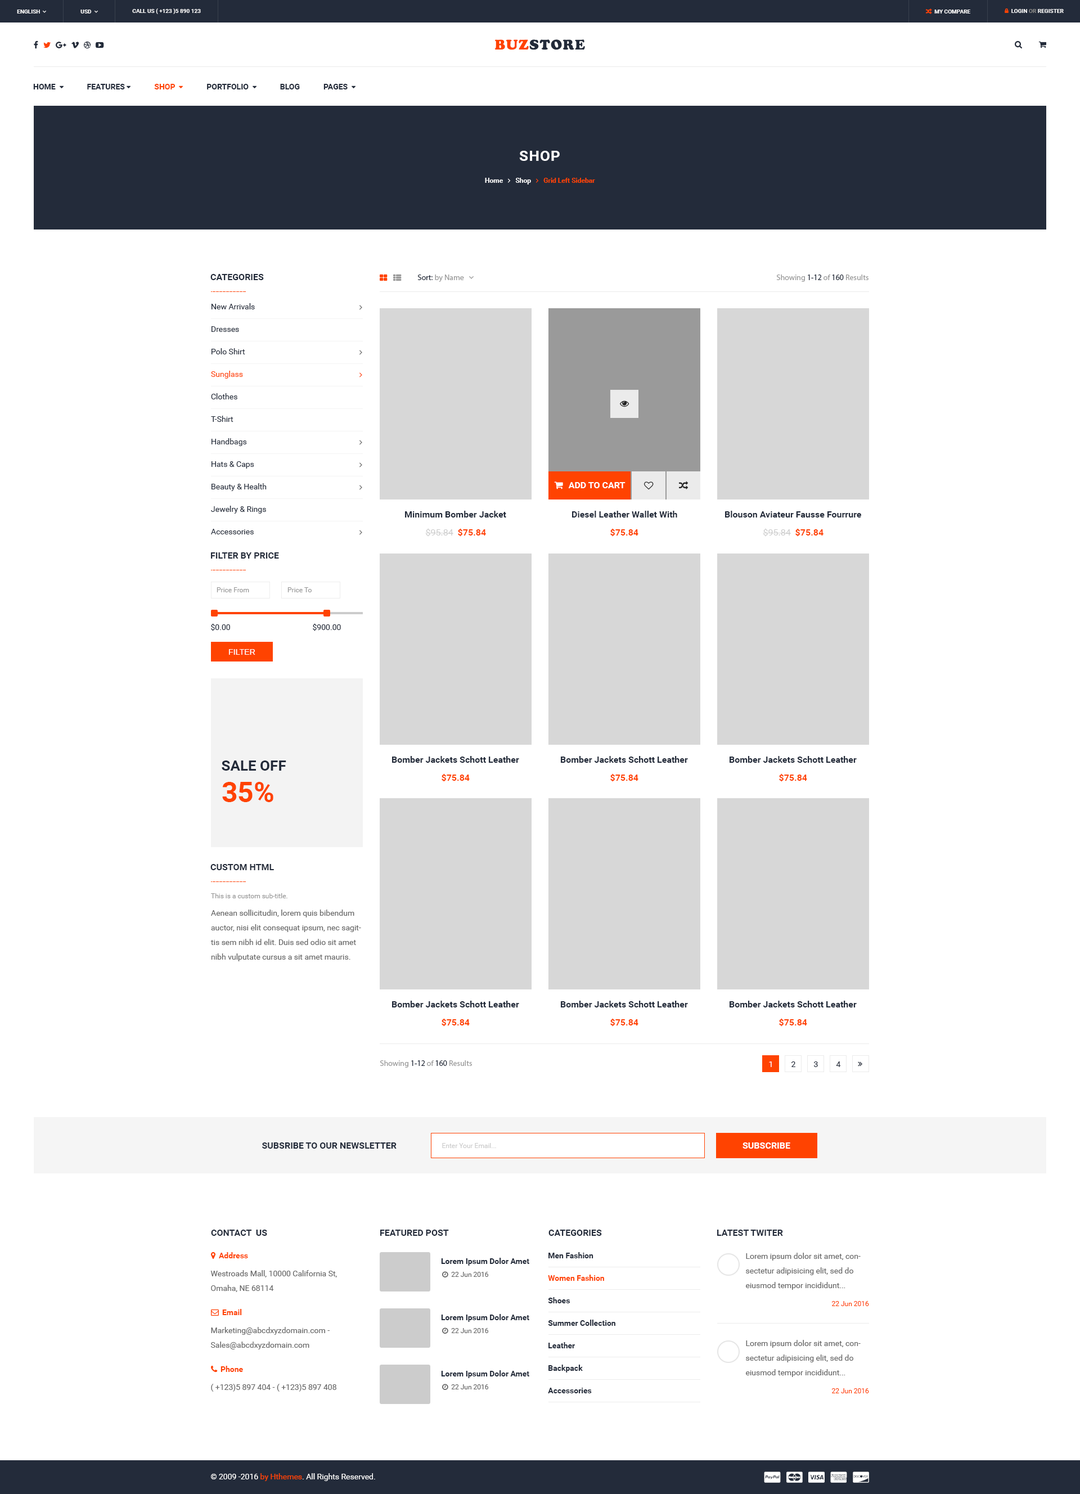
<style>
.page{position:relative;width:1080px;height:1494px;background:#ffffff}
.page>*{position:absolute;margin:0}
.t1{font:5.6px "Roboto-Bold";color:#ffffff;text-transform:uppercase}
.t2{font:14.6px "UTM-Cooper-Black";letter-spacing:0.05em;color:#232b3a;text-transform:uppercase}
.t3{font:14.6px "UTM-Cooper-Black";letter-spacing:0.05em;color:#ff4301;text-transform:uppercase}
.t4{font:14.6px "Roboto-Bold";letter-spacing:0.05em;color:#ffffff;text-transform:uppercase}
.t5{font:9px "Roboto-Bold";color:#232b3a;text-transform:uppercase}
.t6{font:7.9px "MyriadPro-Regular";color:#999999}
.t7{font:7.9px "MyriadPro-Regular";color:#232b3a}
.t8{font:7.9px/22.5px "Roboto-Regular";color:#232b3a}
.t9{font:7.9px/22.5px "Roboto-Regular";color:#ff4301}
.t10{font:9px "Roboto-Bold";color:#232b3a}
.t11{font:9px "Roboto-Regular";color:#cccccc}
.t12{font:9px "Roboto-Bold";color:#ff4301}
.t13{font:6.8px "Roboto-Regular";color:#999999}
.t14{font:7.9px "Roboto-Regular";color:#232b3a}
.t15{font:7.9px "Arimo";letter-spacing:0.01em;color:#ffffff;text-transform:uppercase}
.t16{font:14.6px "Roboto-Bold";color:#232b3a;text-transform:uppercase}
.t17{font:28.1px "Roboto-Bold";color:#ff4301;text-transform:uppercase}
.t18{font:7.9px/14.6px "Roboto-Regular";color:#666666}
.t19{font:7.9px "Roboto-Regular";color:#fefefe}
.t20{font:6.8px "Roboto-Regular";color:#cccccc}
.t21{font:9px "Roboto-Bold";color:#ffffff;text-transform:uppercase}
.t22{font:7.9px/22.5px "Roboto-Bold";color:#232b3a}
.t23{font:7.9px/22.5px "Roboto-Bold";color:#ff4301}
.t24{font:7.9px "Roboto-Bold";color:#232b3a}
.t25{font:6.8px "Roboto-Regular";color:#ff4301}
.t26{font:7.9px "Roboto-Regular";color:#666666}
.t27{font:7.9px "Roboto-Regular";color:#ffffff}
.t28{font:7.9px "Roboto-Regular";color:#ff4301}
</style>
<div class="page">
<p class="t1" style="left:132px;top:8px;width:69px;height:6px">call us ( +123 )5 890 123</p>
<p class="t2" style="left:494px;top:39px;width:91px;height:11px"><span class="t3">buz</span>store</p>
<p class="t4" style="left:519px;top:151px;width:41px;height:10px">SHop</p>
<p class="t5" style="left:210px;top:274px;width:54px;height:6px">categories</p>
<p class="t6" style="left:776px;top:274px;width:92px;height:8px">Showing<span class="t7"> 1-12 </span>of<span class="t7"> 160 </span>Results</p>
<p class="t8" style="left:211px;top:303px;width:56px;height:231px">New Arrivals<br>Dresses<br>Polo Shirt<br><span class="t9">Sunglass<br></span>Clothes<br>T-Shirt<br>Handbags<br>Hats &amp; Caps<br>Beauty &amp; Health<br>Jewelry &amp; Rings<br>Accessories</p>
<p class="t10" style="left:405px;top:511px;width:101px;height:7px">Minimum Bomber Jacket</p>
<p class="t10" style="left:572px;top:511px;width:105px;height:7px">Diesel Leather Wallet With</p>
<p class="t10" style="left:725px;top:511px;width:136px;height:7px">Blouson Aviateur Fausse Fourrure</p>
<p class="t11" style="left:425px;top:528px;width:61px;height:9px">$95.84  <span class="t12">$75.84</span></p>
<p class="t12" style="left:610px;top:528px;width:28px;height:9px">$75.84</p>
<p class="t11" style="left:763px;top:528px;width:61px;height:9px">$95.84  <span class="t12">$75.84</span></p>
<p class="t5" style="left:211px;top:552px;width:68px;height:7px">Filter by price</p>
<p class="t13" style="left:217px;top:587px;width:32px;height:5px">Price From</p>
<p class="t13" style="left:287px;top:587px;width:25px;height:5px">Price To</p>
<p class="t14" style="left:211px;top:623px;width:19px;height:8px">$0.00</p>
<p class="t14" style="left:313px;top:623px;width:28px;height:8px">$900.00</p>
<p class="t15" style="left:229px;top:649px;width:26px;height:6px">Filter</p>
<p class="t16" style="left:222px;top:760px;width:64px;height:11px">Sale OFF</p>
<p class="t10" style="left:392px;top:756px;width:127px;height:7px">Bomber Jackets Schott Leather</p>
<p class="t10" style="left:561px;top:756px;width:127px;height:7px">Bomber Jackets Schott Leather</p>
<p class="t10" style="left:730px;top:756px;width:127px;height:7px">Bomber Jackets Schott Leather</p>
<p class="t12" style="left:442px;top:773px;width:28px;height:9px">$75.84</p>
<p class="t12" style="left:610px;top:773px;width:28px;height:9px">$75.84</p>
<p class="t12" style="left:779px;top:773px;width:28px;height:9px">$75.84</p>
<p class="t17" style="left:222px;top:782px;width:51px;height:20px">35%</p>
<p class="t5" style="left:210px;top:864px;width:64px;height:6px">custom HTML</p>
<p class="t13" style="left:211px;top:893px;width:76px;height:5px">This is a custom sub-title.</p>
<p class="t18" style="left:210px;top:910px;width:151px;height:51px">Aenean sollicitudin, lorem quis bibendum auctor, nisi elit consequat ipsum, nec sagittis sem nibh id elit. Duis sed odio sit amet nibh vulputate cursus a sit amet mauris.</p>
<p class="t10" style="left:392px;top:1001px;width:127px;height:6px">Bomber Jackets Schott Leather</p>
<p class="t10" style="left:561px;top:1001px;width:127px;height:6px">Bomber Jackets Schott Leather</p>
<p class="t10" style="left:730px;top:1001px;width:127px;height:6px">Bomber Jackets Schott Leather</p>
<p class="t12" style="left:442px;top:1018px;width:28px;height:9px">$75.84</p>
<p class="t12" style="left:610px;top:1018px;width:28px;height:9px">$75.84</p>
<p class="t12" style="left:779px;top:1018px;width:28px;height:9px">$75.84</p>
<p class="t6" style="left:380px;top:1060px;width:92px;height:8px">Showing<span class="t7"> 1-12 </span>of<span class="t7"> 160 </span>Results</p>
<p class="t19" style="left:769px;top:1061px;width:3px;height:6px">1</p>
<p class="t14" style="left:791px;top:1061px;width:4px;height:6px">2</p>
<p class="t14" style="left:814px;top:1061px;width:4px;height:6px">3</p>
<p class="t14" style="left:836px;top:1061px;width:5px;height:6px">4</p>
<p class="t5" style="left:262px;top:1142px;width:135px;height:7px">Subsribe to our newsletter</p>
<p class="t20" style="left:442px;top:1143px;width:54px;height:5px">Enter Your Email...</p>
<p class="t21" style="left:742px;top:1142px;width:48px;height:7px">Subscribe</p>
<p class="t5" style="left:211px;top:1230px;width:56px;height:6px">contact  us</p>
<p class="t5" style="left:380px;top:1230px;width:69px;height:6px">featured post</p>
<p class="t5" style="left:548px;top:1230px;width:54px;height:6px">categories</p>
<p class="t5" style="left:717px;top:1230px;width:66px;height:6px">latest twiter</p>
<p class="t22" style="left:548px;top:1252px;width:67px;height:141px">Men Fashion<br><span class="t23">Women Fashion<br></span>Shoes<br>Summer Collection<br>Leather<br>Backpack<br>Accessories</p>
<p class="t18" style="left:746px;top:1253px;width:115px;height:37px">Lorem ipsum dolor sit amet, consectetur adipisicing elit, sed do eiusmod tempor incididunt...</p>
<p class="t24" style="left:441px;top:1258px;width:88px;height:8px">Lorem Ipsum Dolor Amet</p>
<p class="t18" style="left:210px;top:1270px;width:127px;height:22px">Westroads Mall, 10000 California St, Omaha, NE 68114</p>
<p class="t25" style="left:831px;top:1301px;width:38px;height:5px">22 Jun 2016</p>
<p class="t24" style="left:441px;top:1314px;width:88px;height:8px">Lorem Ipsum Dolor Amet</p>
<p class="t18" style="left:210px;top:1327px;width:120px;height:22px">Marketing@abcdxyzdomain.com - <br>Sales@abcdxyzdomain.com</p>
<p class="t18" style="left:746px;top:1340px;width:115px;height:37px">Lorem ipsum dolor sit amet, consectetur adipisicing elit, sed do eiusmod tempor incididunt...</p>
<p class="t24" style="left:441px;top:1370px;width:88px;height:8px">Lorem Ipsum Dolor Amet</p>
<p class="t26" style="left:211px;top:1384px;width:125px;height:8px">( +123)5 897 404 - ( +123)5 897 408</p>
<p class="t25" style="left:831px;top:1388px;width:38px;height:5px">22 Jun 2016</p>
<p class="t27" style="left:211px;top:1473px;width:164px;height:8px">© 2009 -2016 <span class="t28">by Hthemes</span>. All Rights Reserved.</p>
</div>
